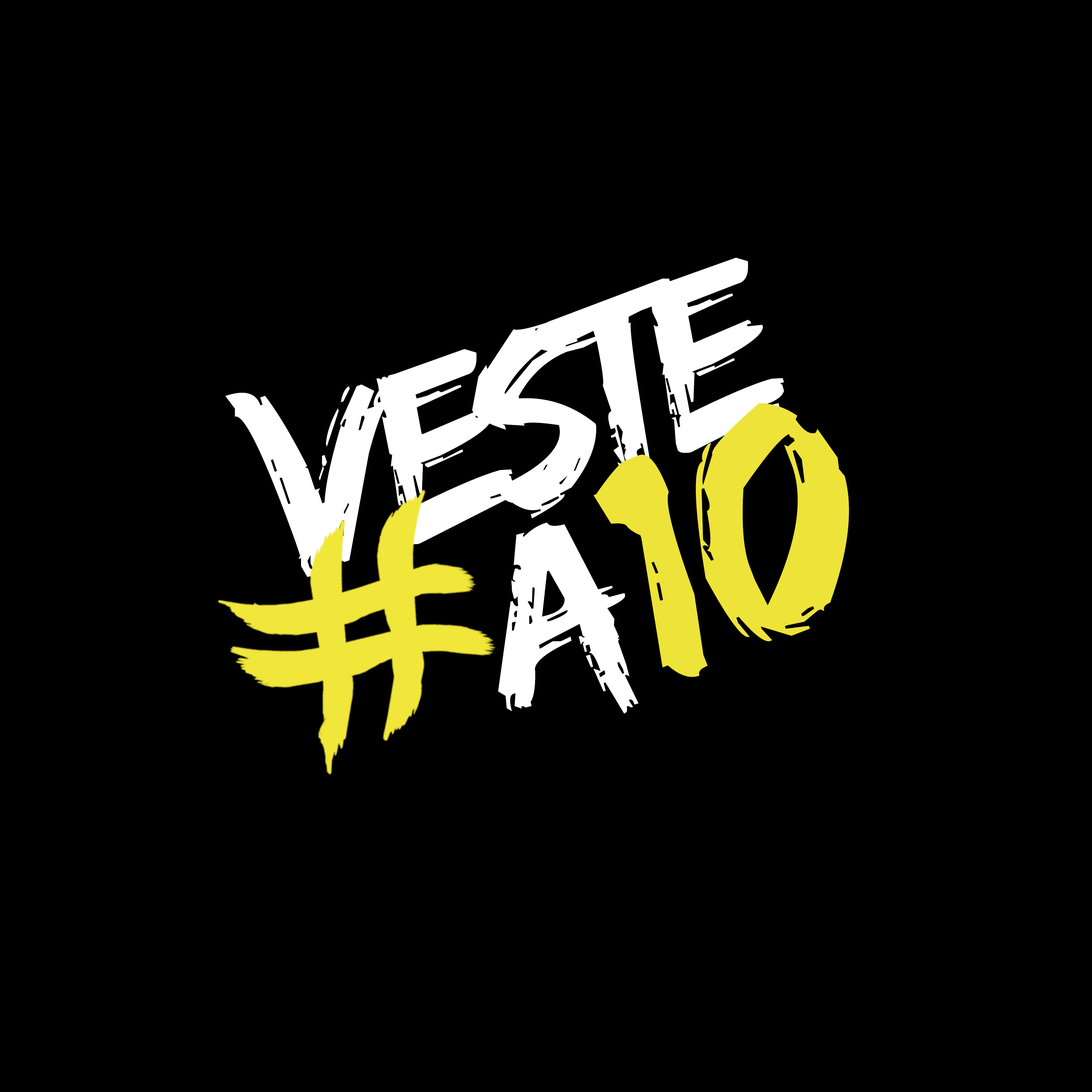
<style>
.page{position:relative;width:1092px;height:1092px;background:#000000}
.page>*{position:absolute;margin:0}
.t1{font:253.2px "EdoSZ";letter-spacing:-0.1em;color:#ffffff}
.t2{font:301.3px "EdoSZ";letter-spacing:-0.1em;color:#ffffff}
.t3{font:339.8px "EdoSZ";color:#eee339}
.t4{font:245.8px "Edo";color:#ffffff}
</style>
<div class="page">
<p class="t1" style="left:225px;top:258px;width:559px;height:319px;rotate:-19deg"><span class="t2">V</span>este</p>
<p class="t3" style="left:593px;top:403px;width:256px;height:274px;rotate:-21deg">10</p>
<p class="t4" style="left:498px;top:522px;width:140px;height:191px;rotate:-15deg">a</p>
</div>
